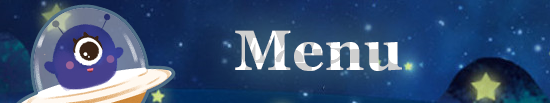
<style>
.page{position:relative;width:550px;height:103px}
.page>*{position:absolute;margin:0}
.t1{font:27.1px "Georgia-Bold"}
</style>
<div class="page">
<p class="t1" style="left:235px;top:30px;width:167px;height:41px">Menu</p>
</div>
